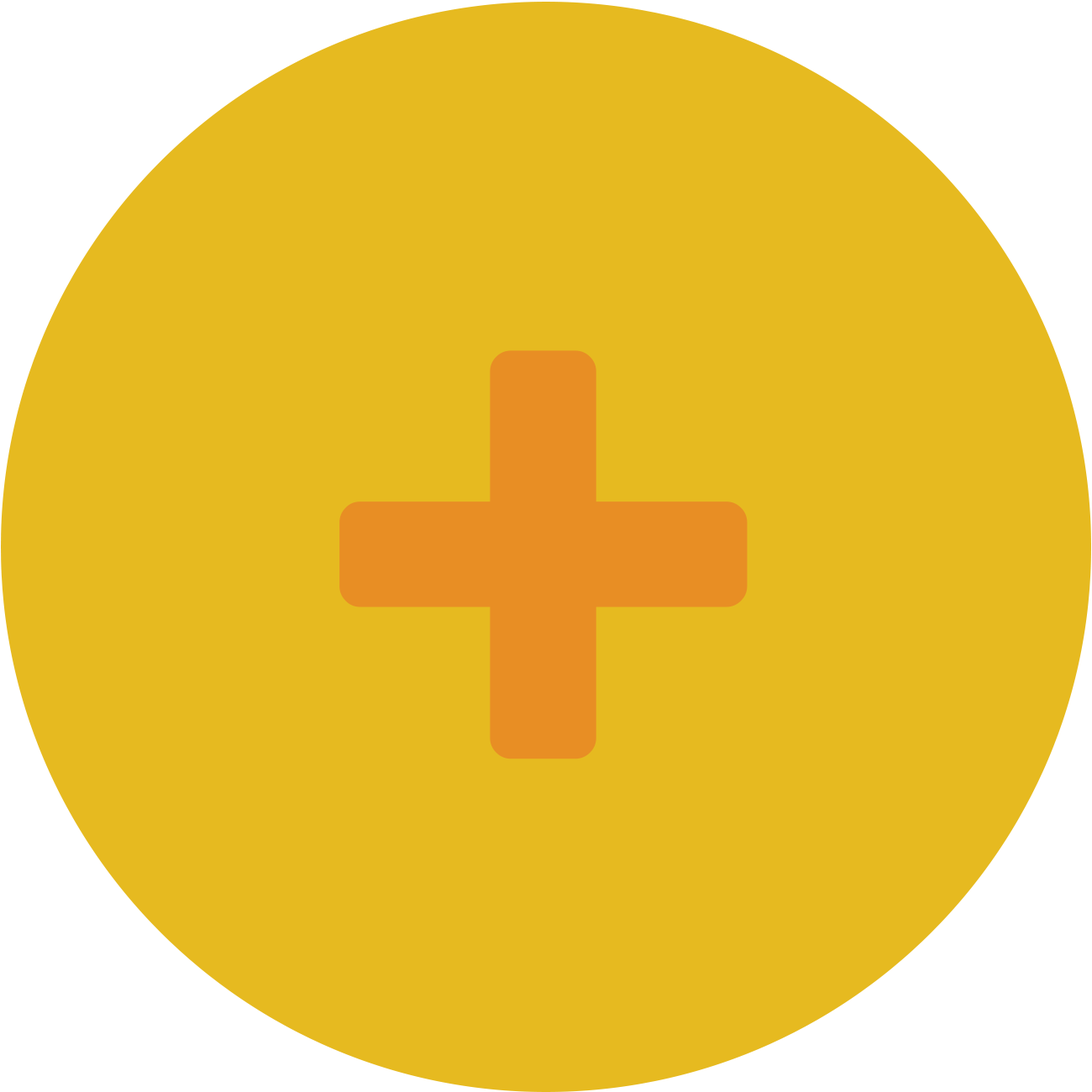
<style>
.page{position:relative;width:1092px;height:1092px;background:#e6ba20}
.page>*{position:absolute;margin:0}
.t1{font:842.8px "Reitam";color:#e88e24}
</style>
<div class="page">
<p class="t1" style="left:339px;top:350px;width:409px;height:409px">+</p>
</div>
